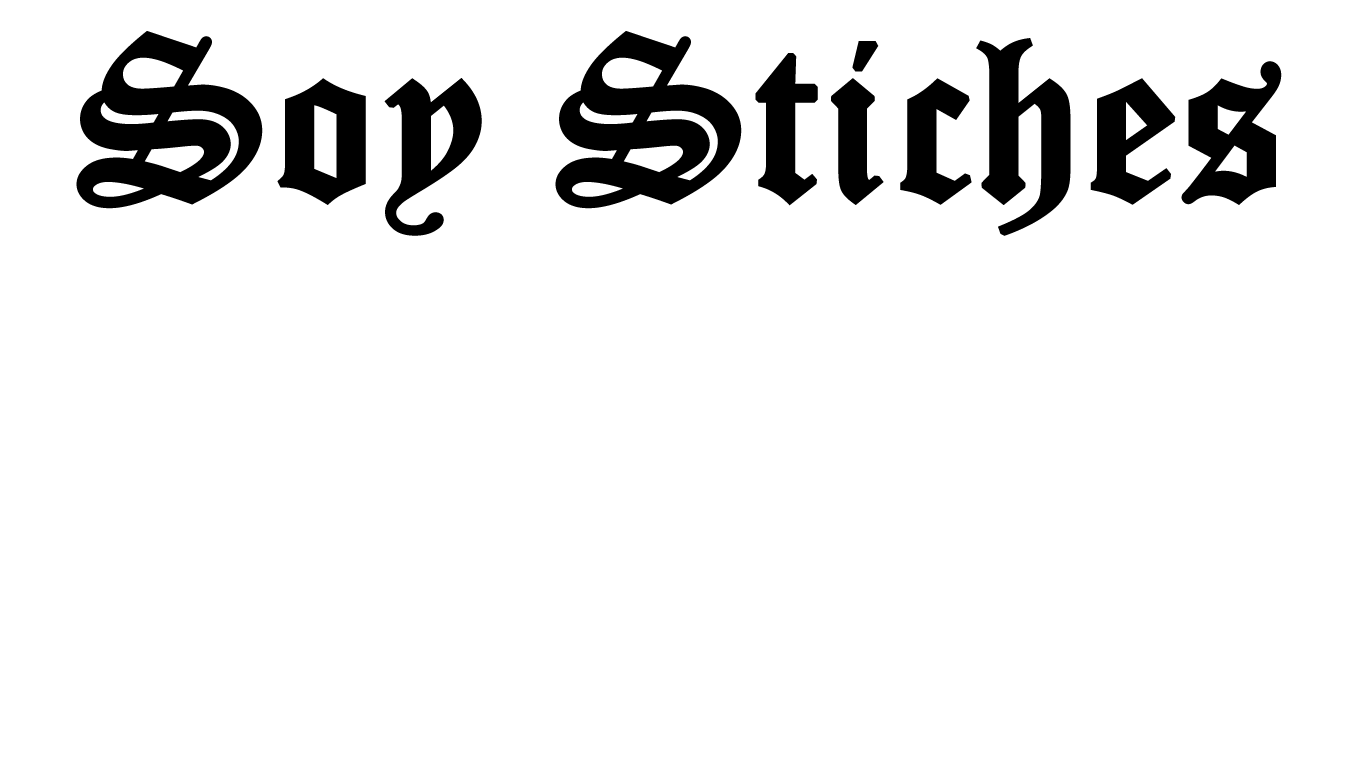
<style>
.page{position:relative;width:1366px;height:768px;background:#ffffff}
.page>*{position:absolute;margin:0}
.t1{font:228px "OldEnglishTextMT";color:#000000;font-weight:bold}
</style>
<div class="page">
<p class="t1" style="left:76px;top:31px;width:1206px;height:205px">Soy Stiches</p>
</div>
